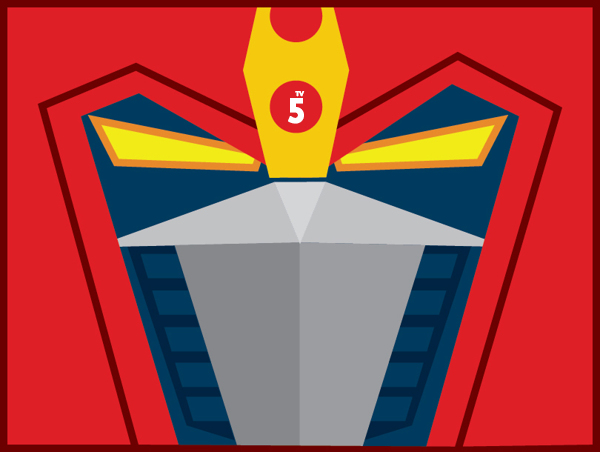
<style>
.page{position:relative;width:600px;height:452px;background:#de1f26}
.page>*{position:absolute;margin:0}
.t1{font:33.2px "FacileSans";color:#ffffff;font-weight:bold}
.t2{font:6.5px "FacileSans";color:#ffffff;font-weight:bold}
</style>
<div class="page">
<p class="t1" style="left:288px;top:98px;width:16px;height:26px">5</p>
<p class="t2" style="left:295px;top:91px;width:10px;height:6px">TV</p>
</div>
